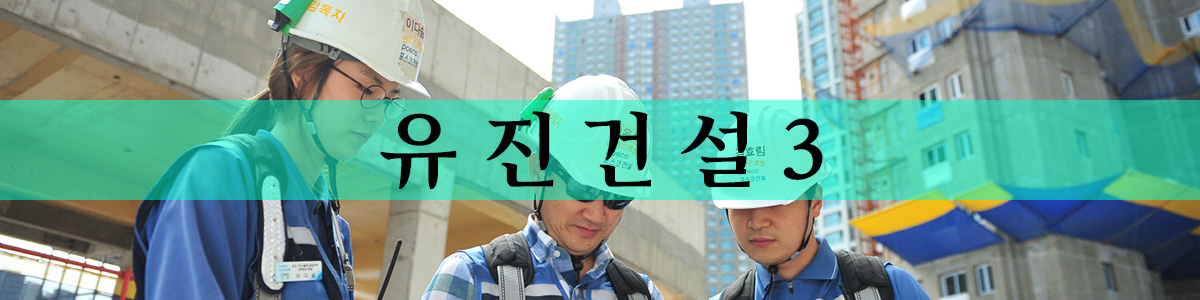
<style>
.page{position:relative;width:1200px;height:300px}
.page>*{position:absolute;margin:0}
.t1{font:83.3px "Arita-buri-Bold_OTF";color:#010101}
</style>
<div class="page">
<p class="t1" style="left:380px;top:111px;width:443px;height:79px">유 진 건 설 3</p>
</div>
